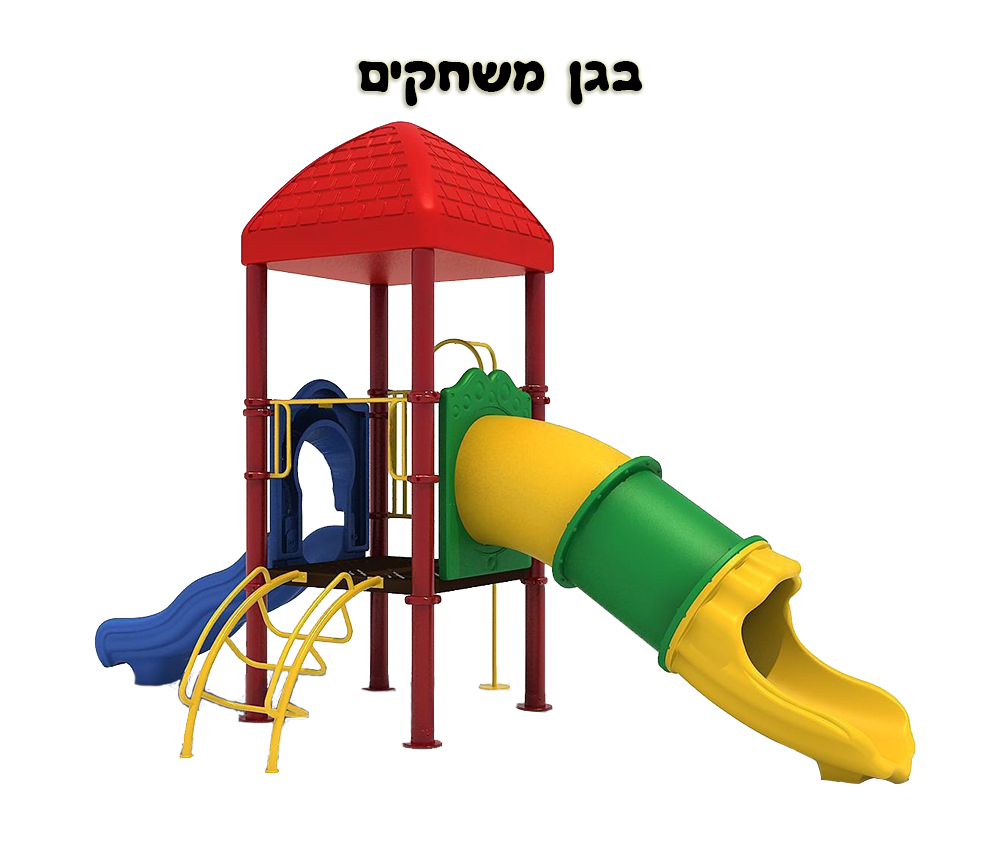
<style>
.page{position:relative;width:1000px;height:841px;background:#ffffff}
.page>*{position:absolute;margin:0}
.t1{font:48.2px "GanCLM-Bold";color:#000000}
</style>
<div class="page">
<p class="t1" style="left:358px;top:61px;width:285px;height:45px">םיקחשמ ןגב</p>
</div>
